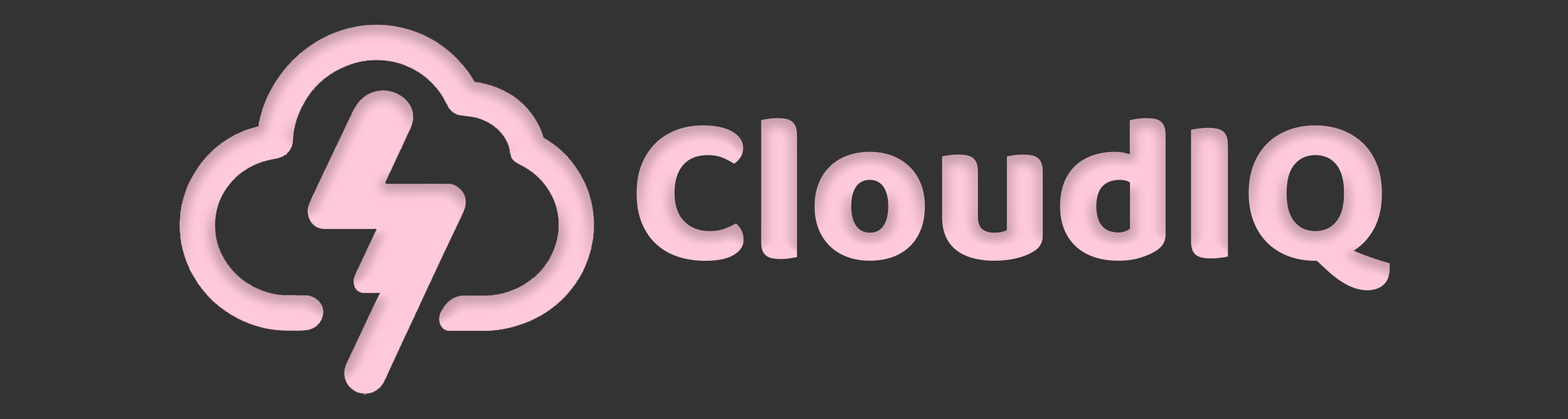
<style>
.page{position:relative;width:1568px;height:419px;background:#333333}
.page>*{position:absolute;margin:0}
.t1{font:210.2px "Baloo-Regular";color:#ffc9dc}
</style>
<div class="page">
<p class="t1" style="left:636px;top:118px;width:754px;height:172px">CloudIQ</p>
</div>
